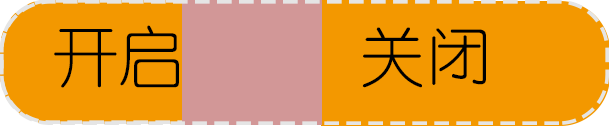
<style>
.page{position:relative;width:609px;height:126px;background:#f39800}
.page>*{position:absolute;margin:0}
.t1{font:66.7px "YouYuan";color:#000000}
</style>
<div class="page">
<p class="t1" style="left:54px;top:25px;width:125px;height:63px">开启</p>
<p class="t1" style="left:362px;top:27px;width:124px;height:61px">关闭</p>
</div>
